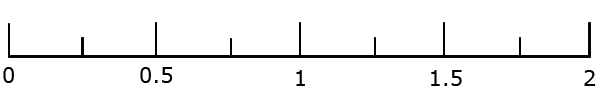
<style>
.page{position:relative;width:600px;height:99px;background:#ffffff}
.page>*{position:absolute;margin:0}
.t1{font:21.2px "Verdana";color:#000000}
</style>
<div class="page">
<p class="t1" style="left:3px;top:67px;width:11px;height:16px">0</p>
<p class="t1" style="left:140px;top:67px;width:33px;height:16px">0.5</p>
<p class="t1" style="left:296px;top:70px;width:9px;height:16px">1</p>
<p class="t1" style="left:431px;top:70px;width:31px;height:16px">1.5</p>
<p class="t1" style="left:584px;top:70px;width:12px;height:16px">2</p>
</div>
